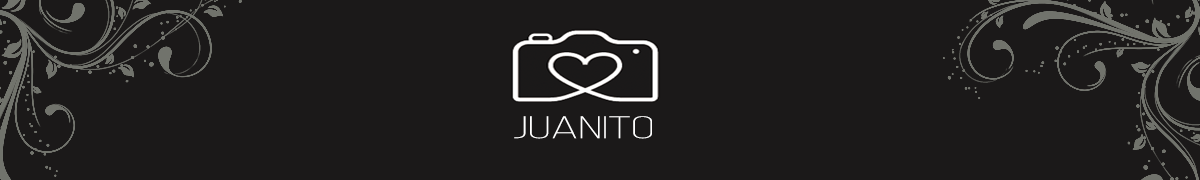
<style>
.page{position:relative;width:1200px;height:180px;background:#1b1919}
.page>*{position:absolute;margin:0}
.t1{font:31px "BebasNeueLight";color:#ffffff;scale:2.01 1}
</style>
<div class="page">
<p class="t1" style="left:514px;top:116px;width:138px;height:23px">juanito</p>
</div>
